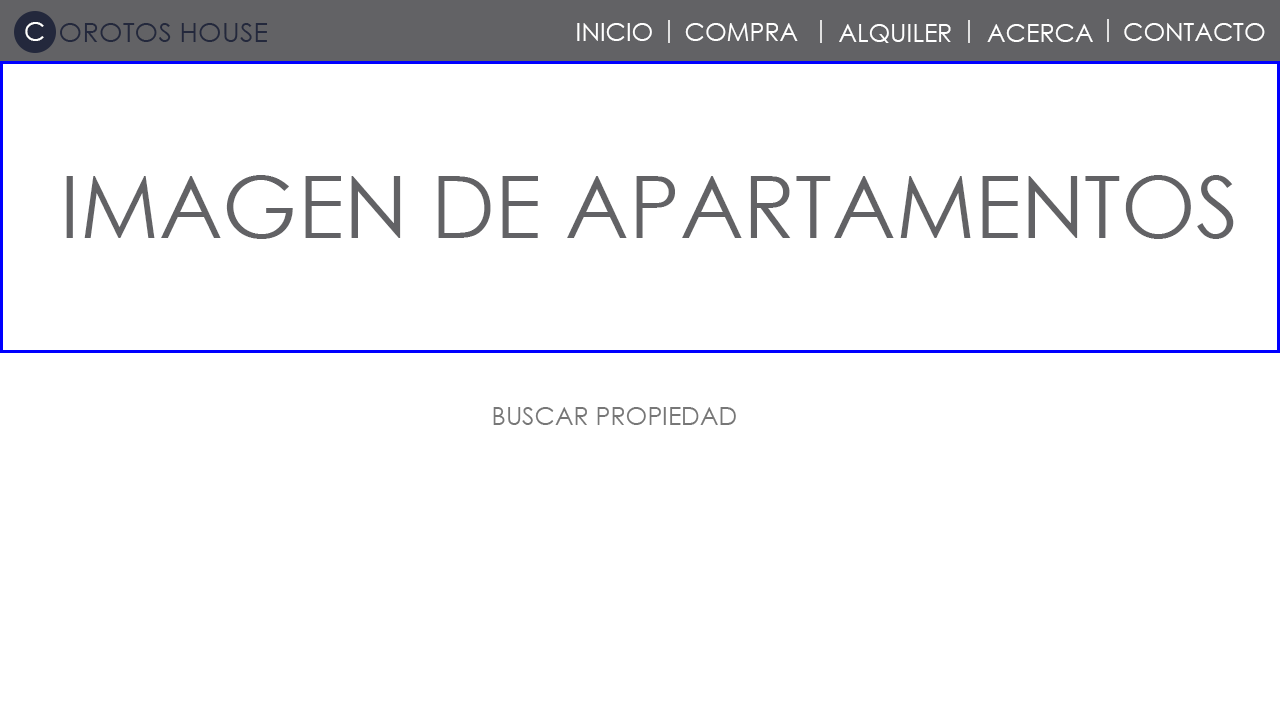
<style>
.page{position:relative;width:1280px;height:720px;background:#ffffff}
.page>*{position:absolute;margin:0}
.t1{font:26.1px "CenturyGothic";color:#ffffff}
.t2{font:27.4px "CenturyGothic";color:#23283c}
.t3{font:25px "CenturyGothic";color:#ffffff}
.t4{font:86px "CenturyGothic";color:#626265}
.t5{font:25px "CenturyGothic";color:#777777}
</style>
<div class="page">
<p class="t1" style="left:25px;top:22px;width:19px;height:19px">C</p>
<p class="t2" style="left:60px;top:23px;width:208px;height:19px">OROTOS HOUSE</p>
<p class="t3" style="left:577px;top:23px;width:75px;height:18px">INICIO</p>
<p class="t3" style="left:685px;top:23px;width:113px;height:18px">COMPRA</p>
<p class="t3" style="left:839px;top:24px;width:112px;height:19px">ALQUILER</p>
<p class="t3" style="left:987px;top:24px;width:106px;height:18px">ACERCA</p>
<p class="t3" style="left:1124px;top:23px;width:141px;height:18px">CONTACTO</p>
<p class="t4" style="left:66px;top:175px;width:1168px;height:64px">IMAGEN DE APARTAMENTOS</p>
<p class="t5" style="left:493px;top:407px;width:243px;height:18px">BUSCAR PROPIEDAD</p>
</div>
